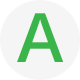
<style>
.page{position:relative;width:80px;height:80px;background:#f5f5f5}
.page>*{position:absolute;margin:0}
.t1{font:70.8px "DengXian-Bold";color:#39b54a}
</style>
<div class="page">
<p class="t1" style="left:17px;top:13px;width:47px;height:49px">A</p>
</div>
